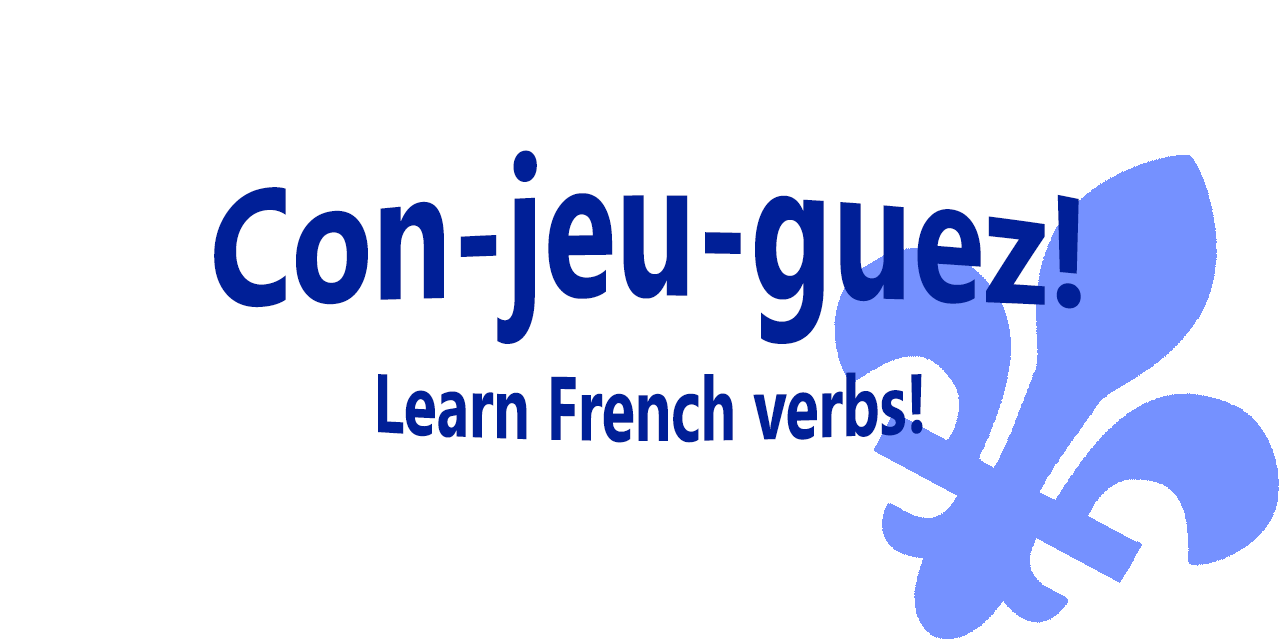
<style>
.page{position:relative;width:1280px;height:640px;background:#ffffff}
.page>*{position:absolute;margin:0}
.t1{font:60px/24px "SegoeUI-Bold";color:#001f97}
.t2{font:132px/24px "SegoeUI-Bold";color:#001f97}
</style>
<div class="page">
<p class="t1" style="left:214px;top:150px;width:867px;height:293px;text-align:center"><span class="t2">Con-jeu-guez!<br><br><br></span><br>Learn French verbs!</p>
</div>
